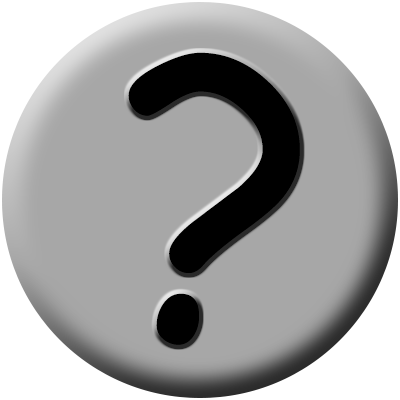
<style>
.page{position:relative;width:400px;height:400px;background:#a7a7a7}
.page>*{position:absolute;margin:0}
.t1{font:385.4px "ComicSansMS";color:#000000}
</style>
<div class="page">
<p class="t1" style="left:128px;top:52px;width:172px;height:293px">?</p>
</div>
